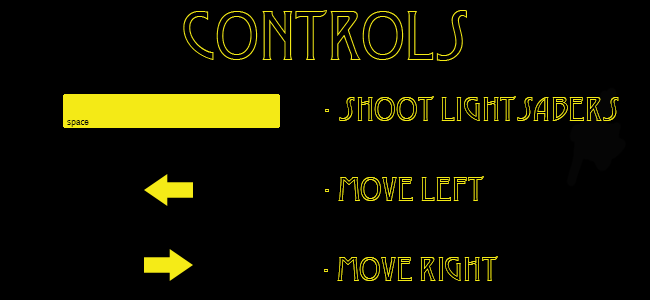
<style>
.page{position:relative;width:650px;height:300px;background:#000000}
.page>*{position:absolute;margin:0}
.t1{font:33.3px "Desdemona";color:#f4ea16}
.t2{font:41.7px "Desdemona";color:#f4ea16}
.t3{font:11.1px "AbadiMT-CondensedLight";color:#050505}
</style>
<div class="page">
<p class="t1" style="left:324px;top:96px;width:295px;height:185px;text-align:center"><span class="t2"><br><br></span>                                             - shoot lightsabers<br><br>                        - Move left<br><br>                          - Move right</p>
<p class="t3" style="left:67px;top:120px;width:22px;height:7px">space</p>
</div>
